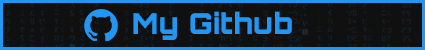
<style>
.page{position:relative;width:425px;height:50px;background:#101010}
.page>*{position:absolute;margin:0}
.t1{font:28.8px "Orbitron-Black";letter-spacing:0.02em;color:#2196f3}
</style>
<div class="page">
<p class="t1" style="left:133px;top:11px;width:159px;height:29px">My Github</p>
</div>
